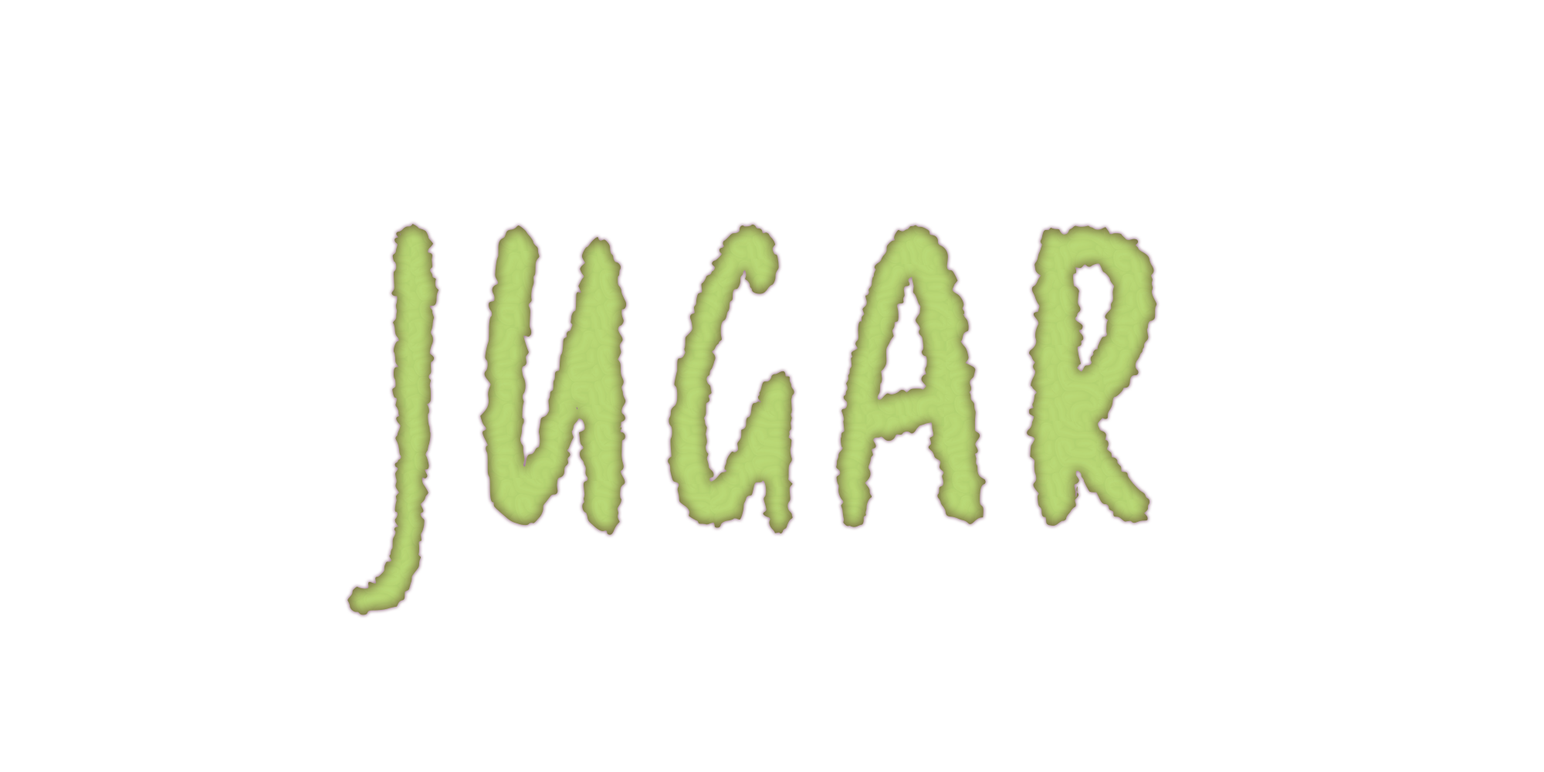
<style>
.page{position:relative;width:1544px;height:772px;background:#ffffff}
.page>*{position:absolute;margin:0}
.t1{font:321.7px "Metalien";letter-spacing:0.1em;color:#b7d974}
</style>
<div class="page">
<p class="t1" style="left:347px;top:224px;width:810px;height:391px">Jugar</p>
</div>
